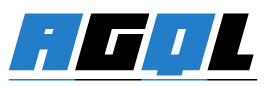
<style>
.page{position:relative;width:269px;height:86px;background:#ffffff}
.page>*{position:absolute;margin:0}
.t1{font:72px "04b19";color:#247dc8;font-style:italic;text-decoration:underline;scale:1.61 1}
.t2{font:72px "04b19";color:#000000;font-style:italic;text-decoration:underline;scale:1.61 1}
</style>
<div class="page">
<p class="t1" style="left:8px;top:13px;width:250px;height:68px">A<span class="t2">G</span>Q<span class="t2">L</span></p>
</div>
